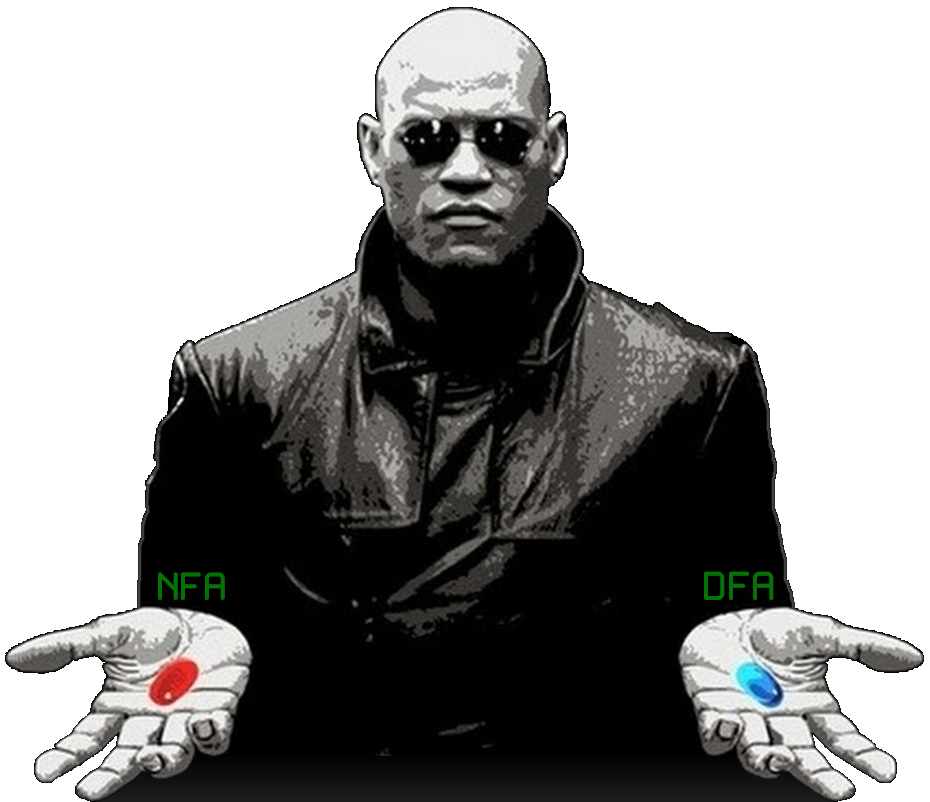
<style>
.page{position:relative;width:930px;height:802px;background:#ffffff}
.page>*{position:absolute;margin:0}
.t1{font:41.3px "WhiteRabbit";color:#067106}
.t2{font:42.4px "WhiteRabbit";color:#067106}
</style>
<div class="page">
<p class="t1" style="left:158px;top:572px;width:67px;height:28px">NFA</p>
<p class="t2" style="left:704px;top:571px;width:70px;height:29px">DFA</p>
</div>
